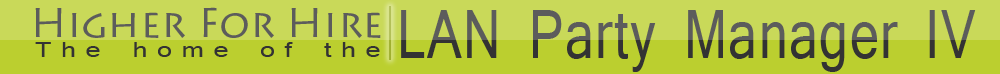
<style>
.page{position:relative;width:1000px;height:74px;background:#c9d959}
.page>*{position:absolute;margin:0}
.t1{font:40px "LithosPro-Regular";color:#5c5c5c}
.t2{font:65px "Mangal";letter-spacing:0.03em;scale:0.77 1}
.t3{font:20px "Mangal";letter-spacing:0.365em;color:#333333;scale:1.3 1}
</style>
<div class="page">
<p class="t1" style="left:35px;top:7px;width:346px;height:31px">Higher For Hire</p>
<p class="t2" style="left:401px;top:10px;width:575px;height:62px">LAN Party Manager IV</p>
<p class="t3" style="left:35px;top:42px;width:345px;height:15px">The home of the</p>
</div>
